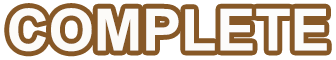
<style>
.page{position:relative;width:336px;height:60px;background:#875826}
.page>*{position:absolute;margin:0}
.t1{font:58px "Arial-BoldMT";color:#ffffff}
</style>
<div class="page">
<p class="t1" style="left:9px;top:8px;width:318px;height:44px">COMPLETE</p>
</div>
